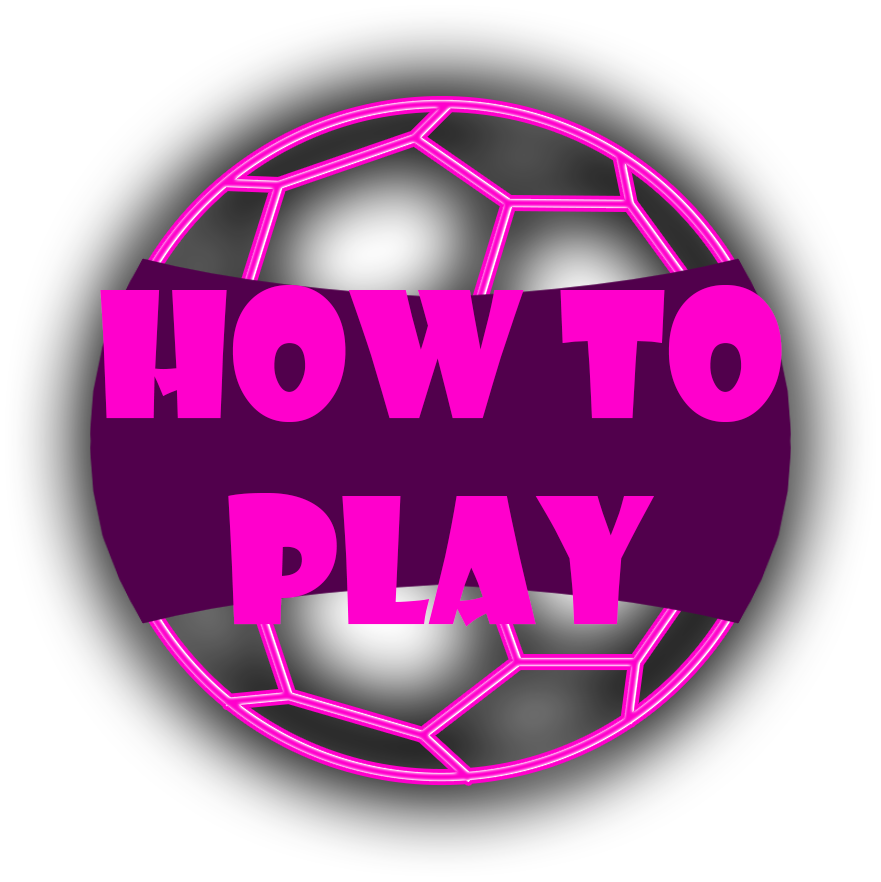
<style>
.page{position:relative;width:881px;height:882px;background:#ffffff}
.page>*{position:absolute;margin:0}
.t1{font:171.1px "ShowcardGothic-Reg";color:#ff00cc}
</style>
<div class="page">
<p class="t1" style="left:100px;top:285px;width:682px;height:342px;text-align:center">how to<br>Play</p>
</div>
